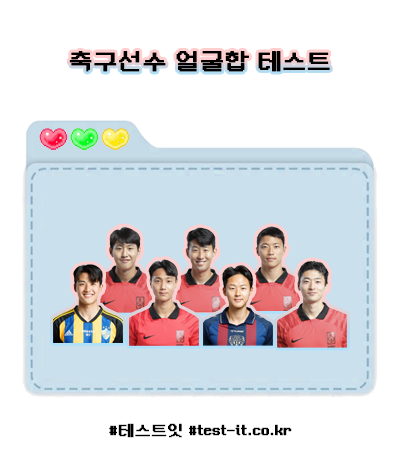
<style>
.page{position:relative;width:400px;height:451px;background:#ffffff}
.page>*{position:absolute;margin:0}
.t1{font:24px "NeoDunggeunmoPro-Regular";color:#000000;font-weight:bold}
.t2{font:16px "NeoDunggeunmoPro-Regular";color:#000000;font-weight:bold}
</style>
<div class="page">
<p class="t1" style="left:69px;top:51px;width:261px;height:21px">축구선수 얼굴합 테스트</p>
<p class="t2" style="left:109px;top:423px;width:183px;height:15px">#테스트잇 #test-it.co.kr</p>
</div>
